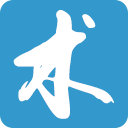
<style>
.page{position:relative;width:128px;height:128px;background:#3399cc}
.page>*{position:absolute;margin:0}
.t1{font:128px "Li-Xuke";color:#ffffff}
</style>
<div class="page">
<p class="t1" style="left:13px;top:10px;width:101px;height:109px">术</p>
</div>
